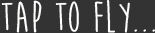
<style>
.page{position:relative;width:155px;height:33px;background:#333333}
.page>*{position:absolute;margin:0}
.t1{font:45px "MoonFlowerBold";color:#fffffe}
</style>
<div class="page">
<p class="t1" style="left:1px;top:0px;width:154px;height:33px">Tap to Fly...</p>
</div>
